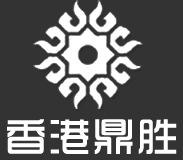
<style>
.page{position:relative;width:183px;height:160px;background:#333333}
.page>*{position:absolute;margin:0}
.t1{font:41.4px "TRENDS";letter-spacing:0.06em;color:#ffffff}
</style>
<div class="page">
<p class="t1" style="left:7px;top:119px;width:170px;height:35px">香港鼎胜</p>
</div>
